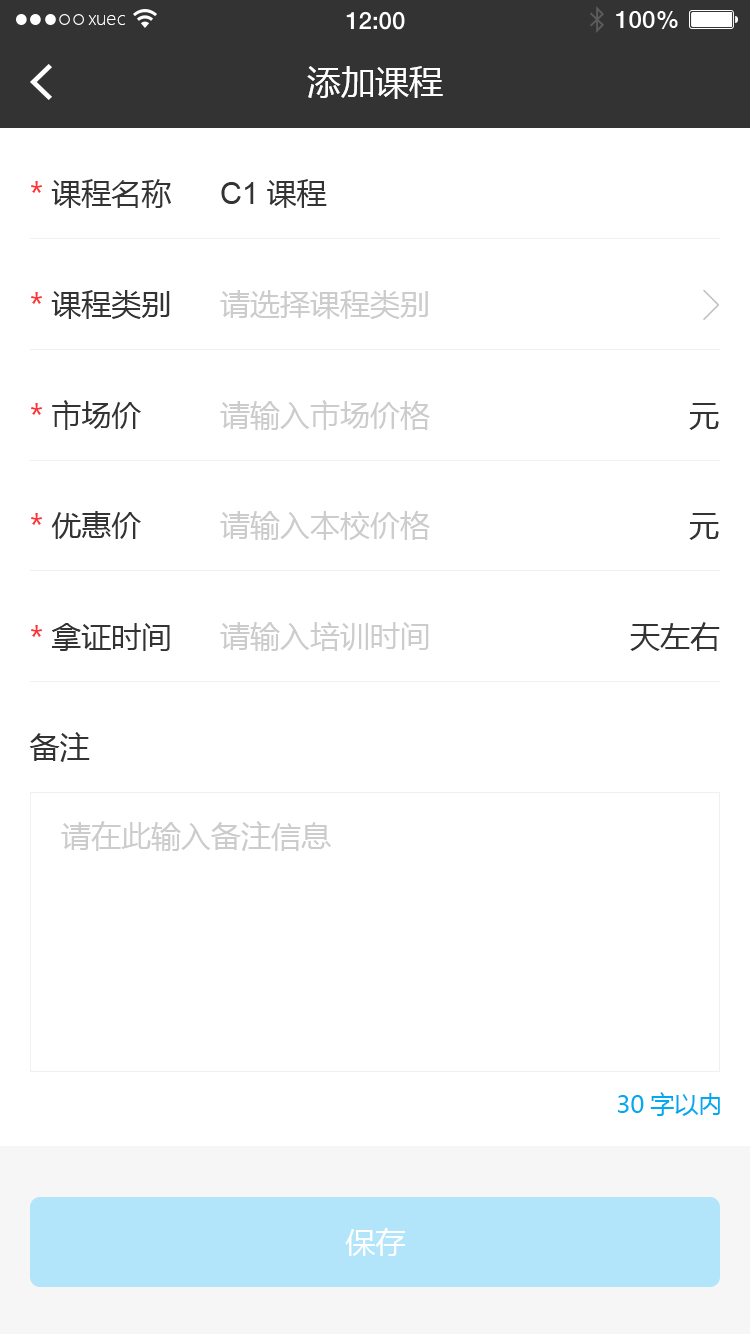
<style>
.page{position:relative;width:750px;height:1334px;background:#ffffff}
.page>*{position:absolute;margin:0}
.t1{font:18px "MicrosoftYaHeiLight";color:#ffffff}
.t2{font:34px "MicrosoftYaHei";color:#ffffff}
.t3{font:30px "MicrosoftYaHei";color:#333333}
.t4{font:30px "MicrosoftYaHei";color:#ff3333}
.t5{font:30px "ArialMT";color:#333333}
.t6{font:30px "MicrosoftYaHei";color:#cccccc}
.t7{font:24px "MicrosoftYaHei";color:#00aaee}
.t8{font:30px "MicrosoftYaHei";color:#ffffff}
</style>
<div class="page">
<p class="t1" style="left:88px;top:15px;width:37px;height:10px">xuec</p>
<p class="t2" style="left:307px;top:66px;width:136px;height:33px">添加课程</p>
<p class="t3" style="left:31px;top:179px;width:140px;height:29px"><span class="t4">*</span>课程名称</p>
<p class="t5" style="left:221px;top:179px;width:106px;height:29px">C1<span class="t3">课程</span></p>
<p class="t3" style="left:31px;top:290px;width:139px;height:29px"><span class="t4">*</span>课程类别</p>
<p class="t6" style="left:220px;top:290px;width:208px;height:29px">请选择课程类别</p>
<p class="t3" style="left:31px;top:400px;width:110px;height:30px"><span class="t4">*</span>市场价</p>
<p class="t6" style="left:220px;top:400px;width:210px;height:30px">请输入市场价格</p>
<p class="t3" style="left:689px;top:403px;width:30px;height:27px">元</p>
<p class="t6" style="left:220px;top:510px;width:210px;height:30px">请输入本校价格</p>
<p class="t3" style="left:31px;top:511px;width:110px;height:28px"><span class="t4">*</span>优惠价</p>
<p class="t3" style="left:689px;top:513px;width:30px;height:27px">元</p>
<p class="t3" style="left:31px;top:623px;width:139px;height:28px"><span class="t4">*</span>拿证时间</p>
<p class="t6" style="left:220px;top:622px;width:209px;height:29px">请输入培训时间</p>
<p class="t3" style="left:630px;top:622px;width:90px;height:29px">天左右</p>
<p class="t3" style="left:29px;top:732px;width:61px;height:30px">备注</p>
<p class="t6" style="left:61px;top:821px;width:270px;height:30px">请在此输入备注信息</p>
<p class="t7" style="left:618px;top:1092px;width:102px;height:24px">30字以内</p>
<p class="t8" style="left:345px;top:1228px;width:60px;height:28px">保存</p>
</div>
